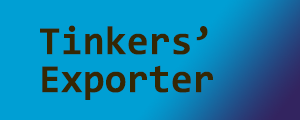
<style>
.page{position:relative;width:300px;height:120px;background:#009fd4}
.page>*{position:absolute;margin:0}
.t1{font:40px/38px "Consolas-Bold";color:#352704}
</style>
<div class="page">
<p class="t1" style="left:40px;top:25px;width:173px;height:75px">Tinkers’<br>Exporter</p>
</div>
